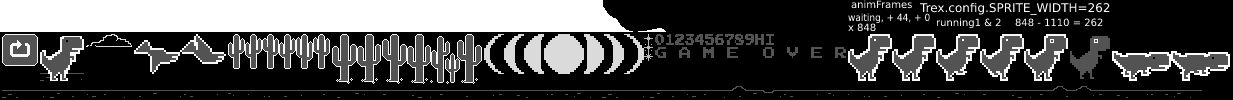
<style>
.page{position:relative;width:1233px;height:100px;background:#000000}
.page>*{position:absolute;margin:0}
.t1{font:10px "DejaVuSans";color:#ffffff}
.t2{font:12px "DejaVuSans";color:#ffffff}
.t3{font:10px "DejaVuSansCondensed";color:#ffffff}
</style>
<div class="page">
<p class="t1" style="left:851px;top:0px;width:61px;height:9px">animFrames</p>
<p class="t2" style="left:919px;top:2px;width:191px;height:13px">Trex.config.SPRITE_WIDTH=262</p>
<p class="t3" style="left:848px;top:13px;width:82px;height:11px">waiting, + 44, + 0</p>
<p class="t1" style="left:848px;top:23px;width:28px;height:9px">x 848</p>
<p class="t1" style="left:936px;top:18px;width:65px;height:11px">running1 &amp; 2</p>
<p class="t1" style="left:1015px;top:18px;width:88px;height:9px">848 - 1110 = 262</p>
</div>
